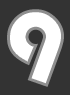
<style>
.page{position:relative;width:70px;height:95px;background:#333333}
.page>*{position:absolute;margin:0}
.t1{font:110px "Bauhaus93";letter-spacing:0.2em;color:#ffffff}
</style>
<div class="page">
<p class="t1" style="left:7px;top:9px;width:57px;height:78px">9</p>
</div>
